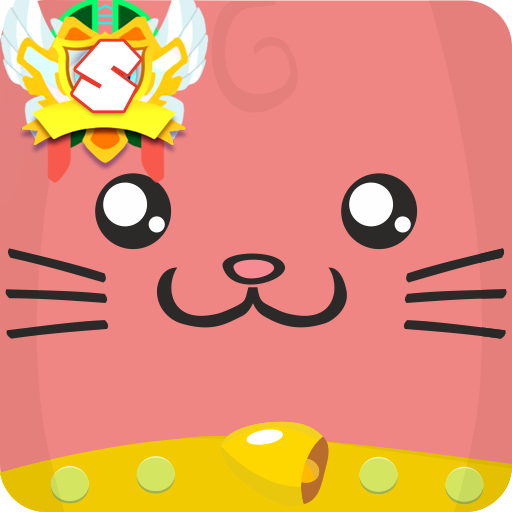
<style>
.page{position:relative;width:512px;height:512px;background:#f08683}
.page>*{position:absolute;margin:0}
.t1{font:91.7px "SuperMarioGalaxy";color:#ffffff}
</style>
<div class="page">
<p class="t1" style="left:73px;top:41px;width:67px;height:70px">S</p>
</div>
